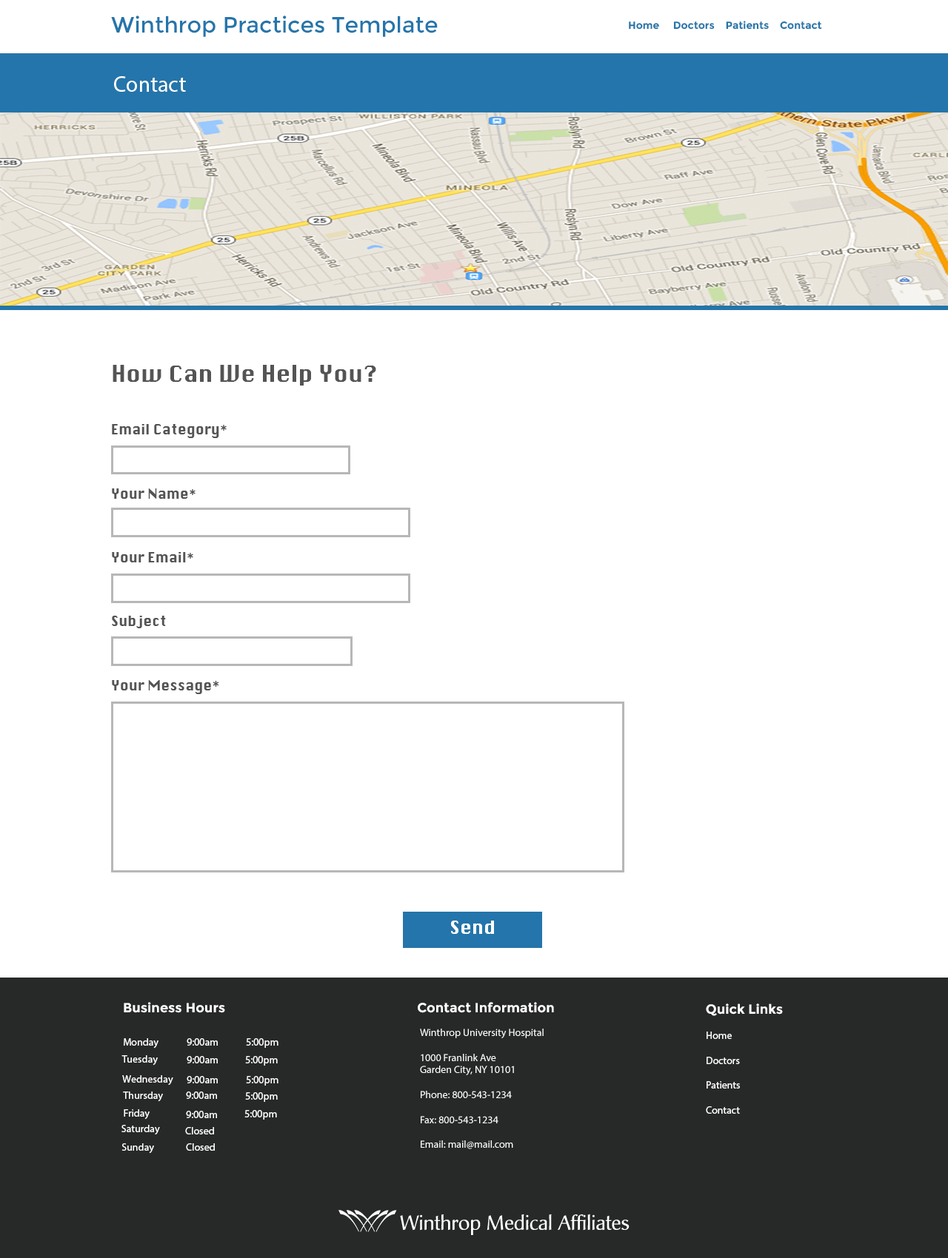
<style>
.page{position:relative;width:948px;height:1258px;background:#ffffff}
.page>*{position:absolute;margin:0}
.t1{font:22.2px "Montserrat-Regular";color:#2475ab}
.t2{font:10.4px "Montserrat-Bold";color:#2475ab}
.t3{font:22.2px "MyriadPro-Regular";color:#ffffff}
.t4{font:22.2px "Silom";color:#545454}
.t5{font:13.3px "Silom";color:#545454}
.t6{font:17.8px "Silom";color:#ffffff}
.t7{font:13.3px "Montserrat-Bold";color:#ffffff}
.t8{font:10.4px "MyriadPro-Regular";color:#ffffff}
</style>
<div class="page">
<p class="t1" style="left:111px;top:16px;width:326px;height:21px">Winthrop Practices Template</p>
<p class="t2" style="left:628px;top:21px;width:194px;height:9px">Home     Doctors    Patients    Contact</p>
<p class="t3" style="left:114px;top:76px;width:72px;height:16px">Contact</p>
<p class="t4" style="left:113px;top:365px;width:263px;height:21px">How Can We Help You?</p>
<p class="t5" style="left:112px;top:424px;width:115px;height:270px">Email Category*<br><br><br><br>Your Name*<br><br><br><br>Your Email*<br><br><br><br>Subject<br><br><br><br>Your Message*</p>
<p class="t6" style="left:451px;top:921px;width:43px;height:13px">Send</p>
<p class="t7" style="left:124px;top:1002px;width:101px;height:11px">Business Hours</p>
<p class="t7" style="left:418px;top:1002px;width:136px;height:11px">Contact Information</p>
<p class="t7" style="left:705px;top:1004px;width:77px;height:12px">Quick Links</p>
<p class="t8" style="left:420px;top:1029px;width:123px;height:121px">Winthrop University Hospital<br><br>1000 Franlink Ave <br>Garden City, NY 10101<br><br>Phone: 800-543-1234<br><br>Fax: 800-543-1234<br><br>Email: mail@mail.com</p>
<p class="t8" style="left:705px;top:1032px;width:35px;height:82px">Home<br><br>Doctors<br><br>Patients<br><br>Contact</p>
<p class="t8" style="left:124px;top:1039px;width:34px;height:10px">Monday</p>
<p class="t8" style="left:187px;top:1039px;width:31px;height:7px">9:00am</p>
<p class="t8" style="left:246px;top:1039px;width:32px;height:9px">5:00pm</p>
<p class="t8" style="left:121px;top:1056px;width:37px;height:10px">Tuesday</p>
<p class="t8" style="left:187px;top:1056px;width:31px;height:8px">9:00am</p>
<p class="t8" style="left:245px;top:1056px;width:33px;height:10px">5:00pm</p>
<p class="t8" style="left:122px;top:1076px;width:51px;height:9px">Wednesday</p>
<p class="t8" style="left:187px;top:1076px;width:31px;height:8px">9:00am</p>
<p class="t8" style="left:246px;top:1076px;width:32px;height:10px">5:00pm</p>
<p class="t8" style="left:123px;top:1092px;width:40px;height:10px">Thursday</p>
<p class="t8" style="left:186px;top:1092px;width:31px;height:7px">9:00am</p>
<p class="t8" style="left:245px;top:1093px;width:33px;height:9px">5:00pm</p>
<p class="t8" style="left:124px;top:1110px;width:26px;height:10px">Friday</p>
<p class="t8" style="left:186px;top:1111px;width:31px;height:8px">9:00am</p>
<p class="t8" style="left:244px;top:1110px;width:33px;height:10px">5:00pm</p>
<p class="t8" style="left:121px;top:1125px;width:39px;height:10px">Saturday</p>
<p class="t8" style="left:185px;top:1127px;width:29px;height:8px">Closed</p>
<p class="t8" style="left:121px;top:1144px;width:33px;height:10px">Sunday</p>
<p class="t8" style="left:186px;top:1144px;width:29px;height:7px">Closed</p>
</div>
